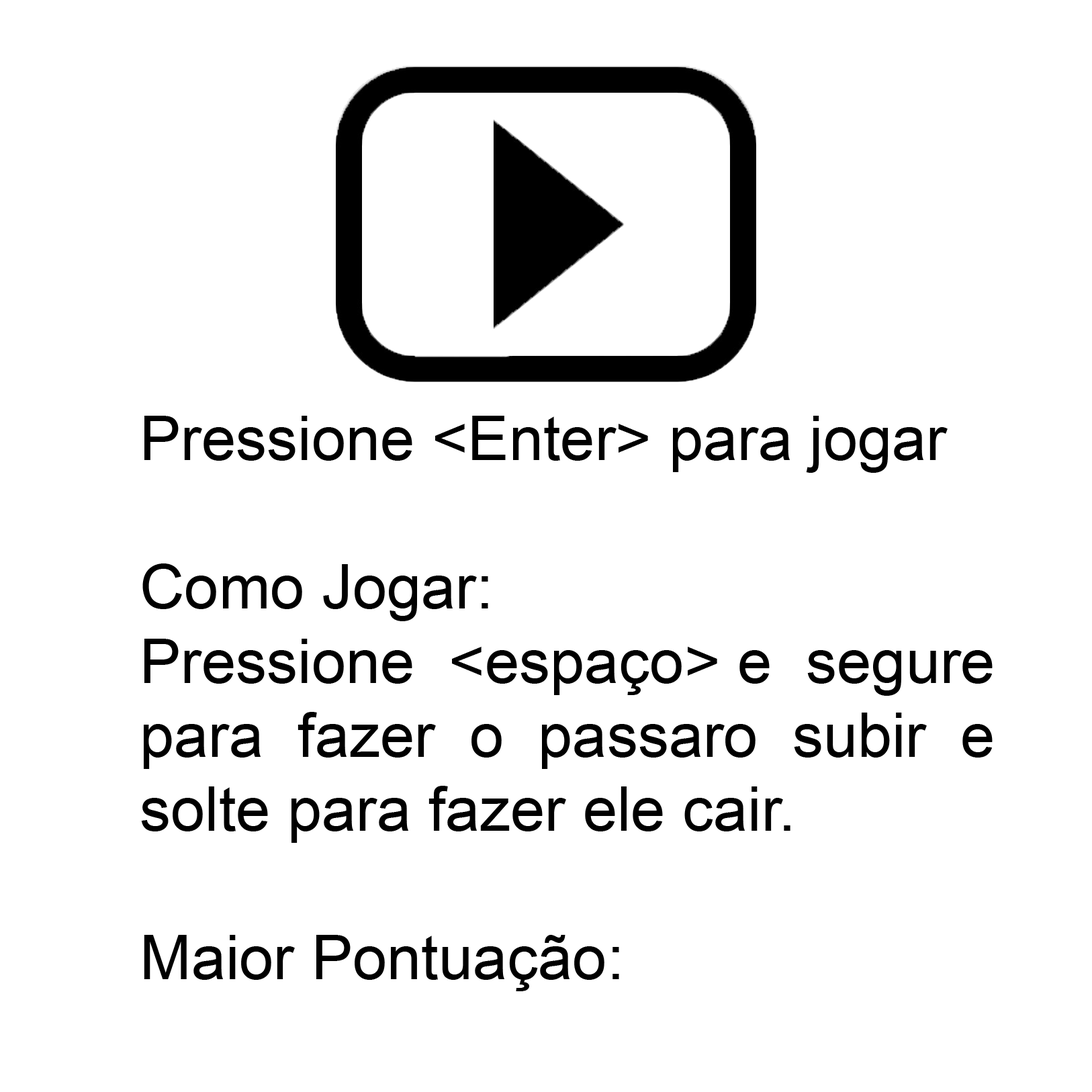
<style>
.page{position:relative;width:1092px;height:1092px;background:#ffffff}
.page>*{position:absolute;margin:0}
.t1{font:61.8px "ArialMT";color:#000000}
</style>
<div class="page">
<p class="t1" style="left:141px;top:416px;width:852px;height:575px">Pressione &lt;Enter&gt; para jogar<br><br>Como Jogar:<br>Pressione  &lt;espaço&gt; e  segure<br>para  fazer  o  passaro  subir  e<br>solte para fazer ele cair.<br><br>Maior Pontuação:</p>
</div>
